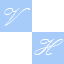
<style>
.page{position:relative;width:64px;height:64px;background:#ffffff}
.page>*{position:absolute;margin:0}
.t1{font:33.3px "PalaceScriptMT";color:#ffffff}
.t2{font:22.8px "KunstlerScript";color:#ffffff}
</style>
<div class="page">
<p class="t1" style="left:4px;top:8px;width:26px;height:18px">V</p>
<p class="t2" style="left:34px;top:39px;width:29px;height:16px">H</p>
</div>
